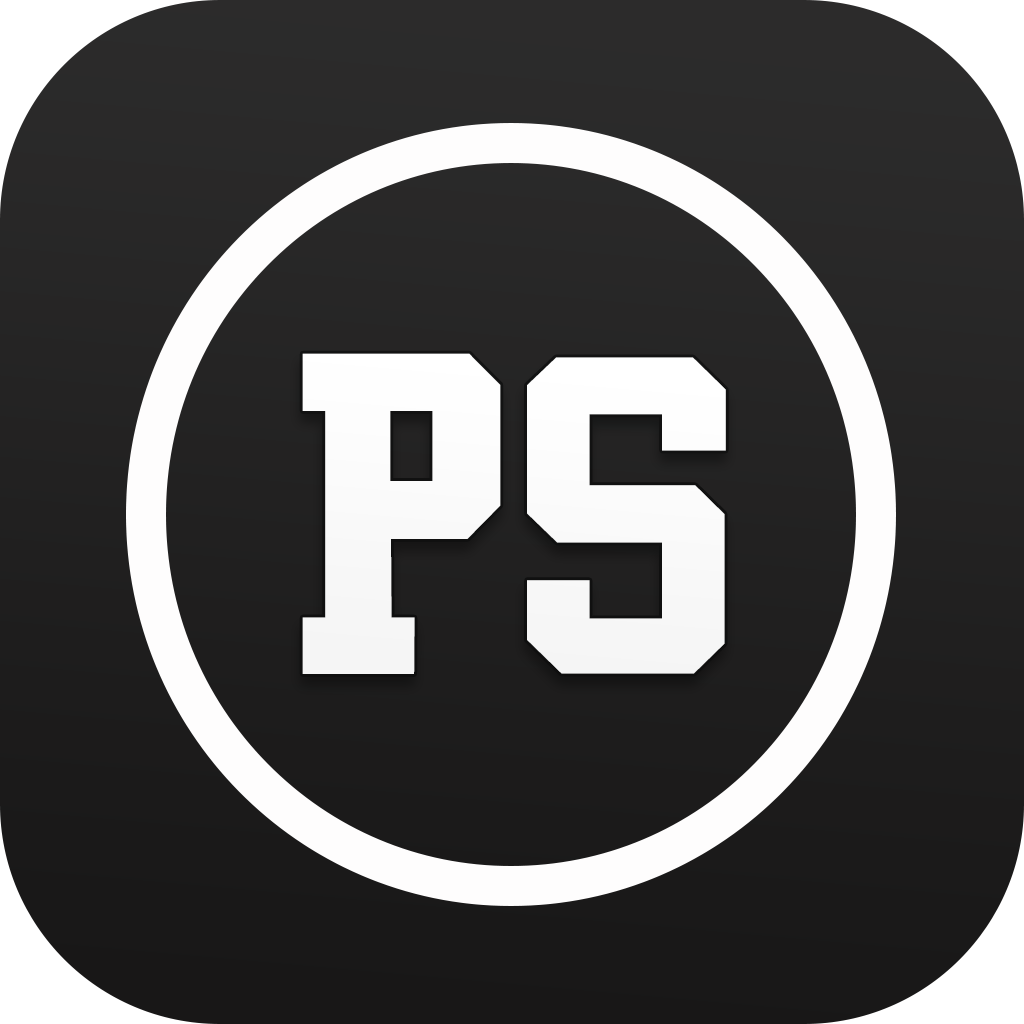
<style>
.page{position:relative;width:1024px;height:1024px}
.page>*{position:absolute;margin:0}
.t1{font:395.8px "Athletic";letter-spacing:0.03em;color:#ffffff}
.t2{font:391.9px "Athletic";letter-spacing:0.03em;color:#ffffff}
</style>
<div class="page">
<p class="t1" style="left:302px;top:353px;width:424px;height:321px">P<span class="t2">S</span></p>
</div>
